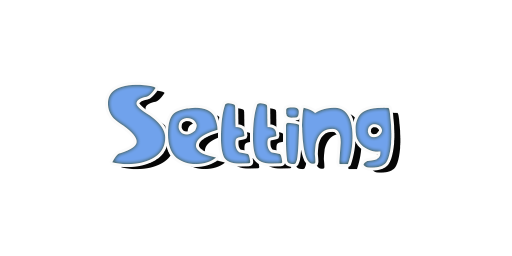
<style>
.page{position:relative;width:512px;height:256px;background:#ffffff}
.page>*{position:absolute;margin:0}
.t1{font:113.1px "Samba";letter-spacing:0.025em;color:#70a2ec}
.t2{font:113.1px "Samba";letter-spacing:0.025em}
</style>
<div class="page">
<p class="t1" style="left:108px;top:84px;width:284px;height:84px">Setting</p>
<p class="t2" style="left:117px;top:89px;width:284px;height:84px">Setting</p>
</div>
